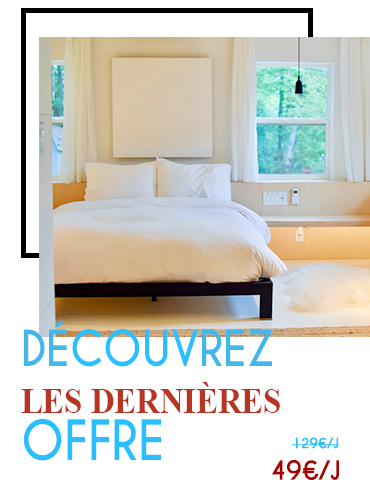
<style>
.page{position:relative;width:370px;height:500px;background:#ffffff}
.page>*{position:absolute;margin:0}
.t1{font:36.4px/46.8px "TimesNewRomanPS-BoldMT";color:#b83523;text-transform:uppercase;scale:0.9 1}
.t2{font:46.8px/46.8px "CaviarDreams-Bold";color:#42b7e9;text-transform:uppercase;scale:0.9 1}
.t3{font:46.8px/46.8px "CaviarDreams-Bold";color:#2abfff;text-transform:uppercase;scale:0.9 1}
.t4{font:52px/46.8px "CaviarDreams-Bold";color:#29bfff;text-transform:uppercase;scale:0.9 1}
.t5{font:13.4px "CaviarDreams-Bold";letter-spacing:-0.01em;color:#29bfff}
.t6{font:24.7px "CaviarDreams-Bold";letter-spacing:-0.01em;color:#a90000}
</style>
<div class="page">
<p class="t1" style="left:21px;top:320px;width:259px;height:141px"><span class="t2">Dé</span><span class="t3">couv</span><span class="t2">rez <br></span>les dernières <br><span class="t4">offre</span></p>
<p class="t5" style="left:291px;top:437px;width:48px;height:12px">129€/J</p>
<p class="t6" style="left:272px;top:460px;width:67px;height:20px">49€/J</p>
</div>
